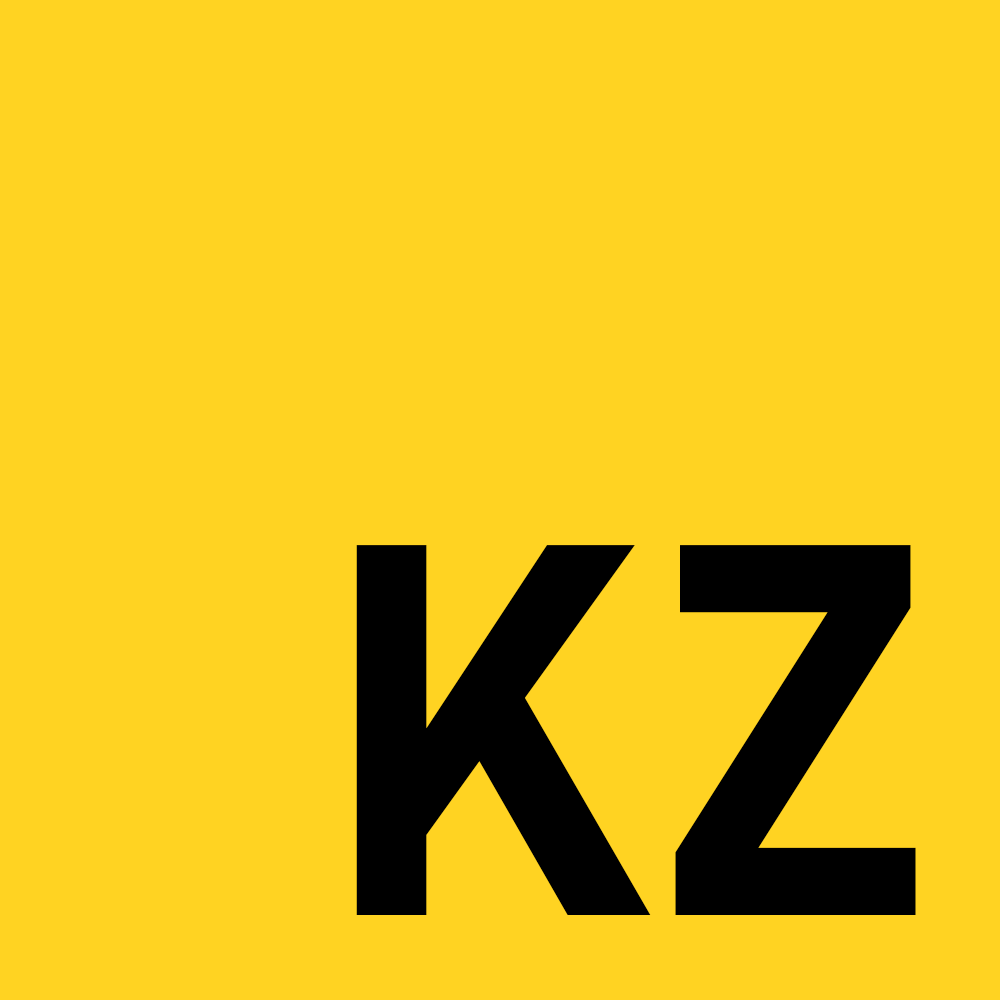
<style>
.page{position:relative;width:1000px;height:1000px;background:#ffd322}
.page>*{position:absolute;margin:0}
.t1{font:521px "Bahnschrift-Bold";color:#000000}
</style>
<div class="page">
<p class="t1" style="left:356px;top:545px;width:560px;height:370px">KZ</p>
</div>
